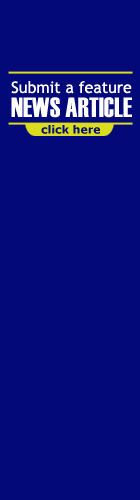
<style>
.page{position:relative;width:140px;height:500px;background:#030979}
.page>*{position:absolute;margin:0}
.t1{font:16px "TrebuchetMS";color:#ffffff}
.t2{font:28px "Haettenschweiler";color:#ffffff}
.t3{font:11px "Verdana-Bold";color:#030979}
</style>
<div class="page">
<p class="t1" style="left:11px;top:81px;width:121px;height:13px">Submit a feature</p>
<p class="t2" style="left:11px;top:97px;width:121px;height:21px">NEWS ARTICLE</p>
<p class="t3" style="left:41px;top:125px;width:59px;height:9px">click here</p>
</div>
